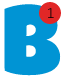
<style>
.page{position:relative;width:61px;height:79px;background:#0094d4}
.page>*{position:absolute;margin:0}
.t1{font:14px "Abel-Regular"}
</style>
<div class="page">
<p class="t1" style="left:48px;top:8px;width:6px;height:10px">1</p>
</div>
